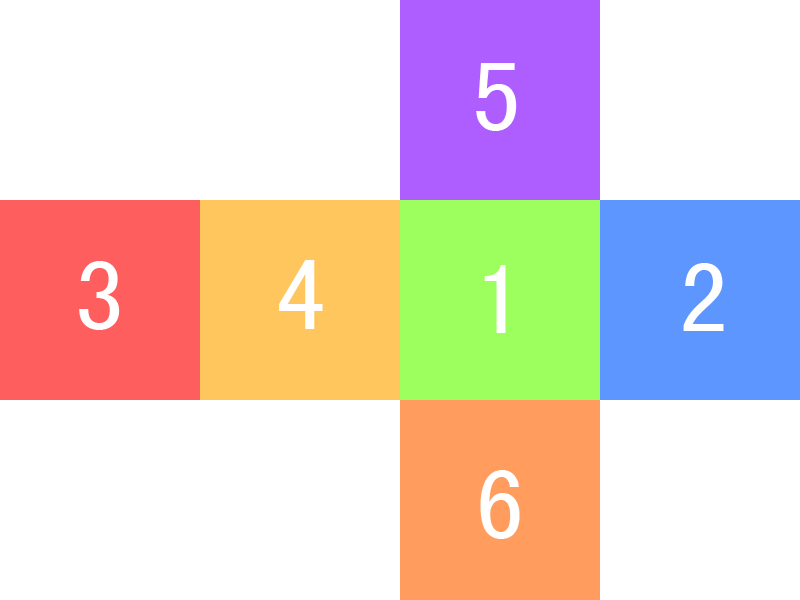
<style>
.page{position:relative;width:800px;height:600px;background:#ffffff}
.page>*{position:absolute;margin:0}
.t1{font:100px "SimHei";letter-spacing:0.02em;color:#ffffff}
</style>
<div class="page">
<p class="t1" style="left:476px;top:63px;width:41px;height:68px">5</p>
<p class="t1" style="left:79px;top:261px;width:41px;height:69px">3</p>
<p class="t1" style="left:279px;top:260px;width:44px;height:69px">4</p>
<p class="t1" style="left:484px;top:265px;width:22px;height:68px">1</p>
<p class="t1" style="left:683px;top:263px;width:41px;height:68px">2</p>
<p class="t1" style="left:480px;top:470px;width:40px;height:69px">6</p>
</div>
